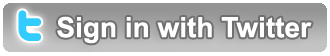
<style>
.page{position:relative;width:330px;height:56px;background:#ffffff}
.page>*{position:absolute;margin:0}
.t1{font:28px "Arial-BoldMT";color:#ffffff}
</style>
<div class="page">
<p class="t1" style="left:57px;top:16px;width:255px;height:28px">Sign in with Twitter</p>
</div>
